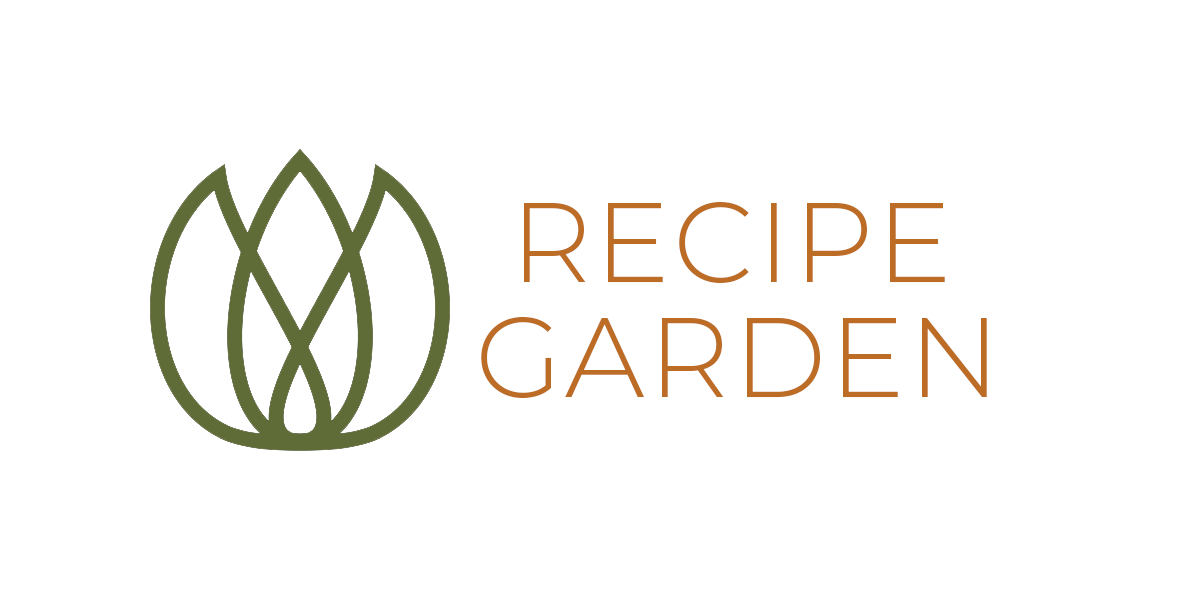
<style>
.page{position:relative;width:1200px;height:600px;background:#ffffff}
.page>*{position:absolute;margin:0}
.t1{font:113.3px "Montserrat-Light";letter-spacing:0.025em;color:#bc6c25;text-transform:uppercase}
</style>
<div class="page">
<p class="t1" style="left:524px;top:202px;width:421px;height:81px">recipe</p>
<p class="t1" style="left:481px;top:317px;width:506px;height:81px">GARDEN</p>
</div>
